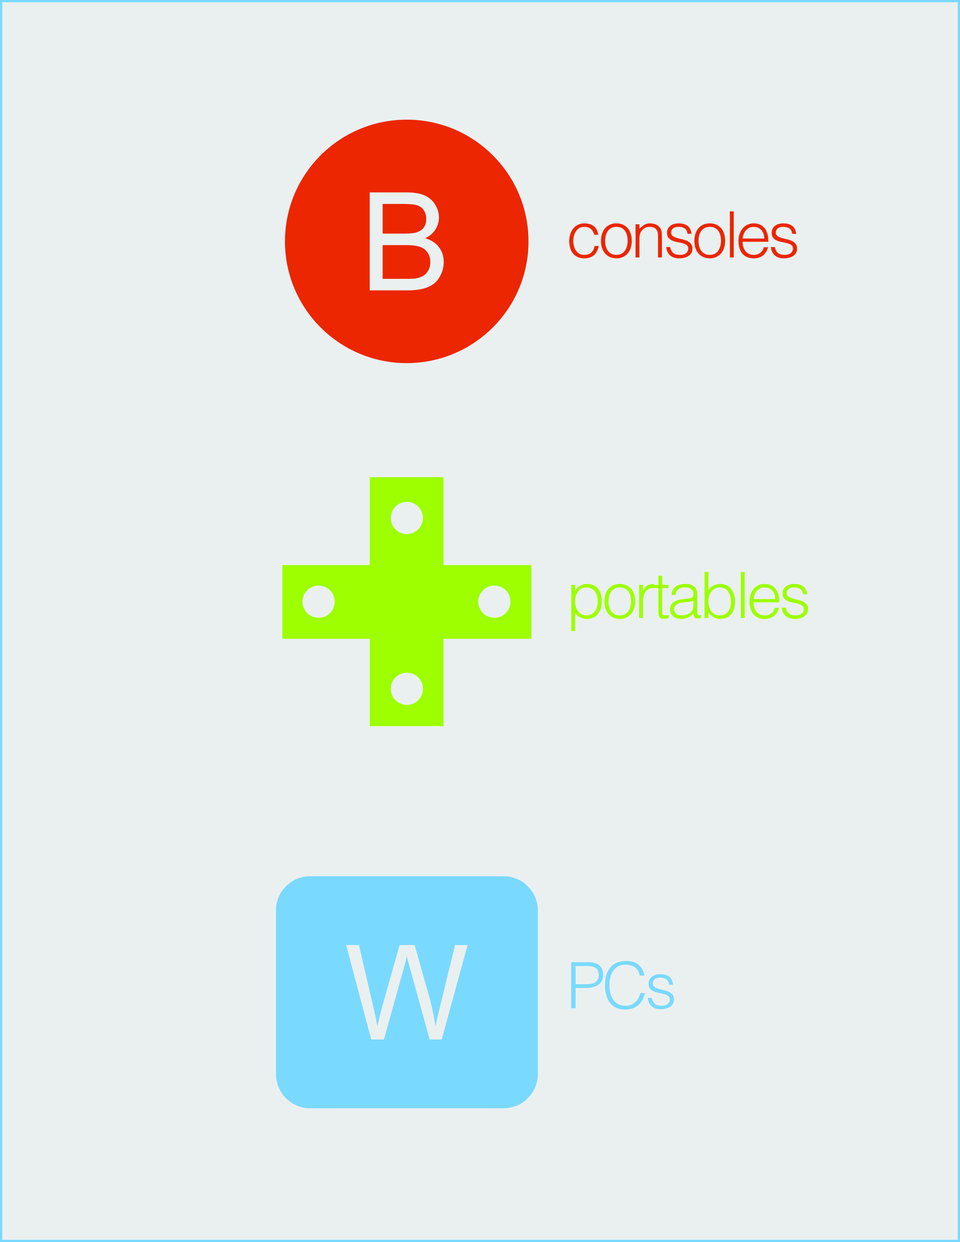
<style>
.page{position:relative;width:960px;height:1242px;background:#eaf0f0}
.page>*{position:absolute;margin:0}
.t1{font:64px "Helvetica-Light";letter-spacing:-0.05em;color:#eb2600}
.t2{font:64px "Helvetica-Light";letter-spacing:-0.05em;color:#9dff00}
.t3{font:64px "Helvetica-Light";letter-spacing:-0.05em;color:#7ad9ff}
</style>
<div class="page">
<p class="t1" style="left:569px;top:211px;width:228px;height:48px">consoles</p>
<p class="t2" style="left:571px;top:572px;width:237px;height:59px">portables</p>
<p class="t3" style="left:571px;top:961px;width:103px;height:49px">PCs</p>
</div>
